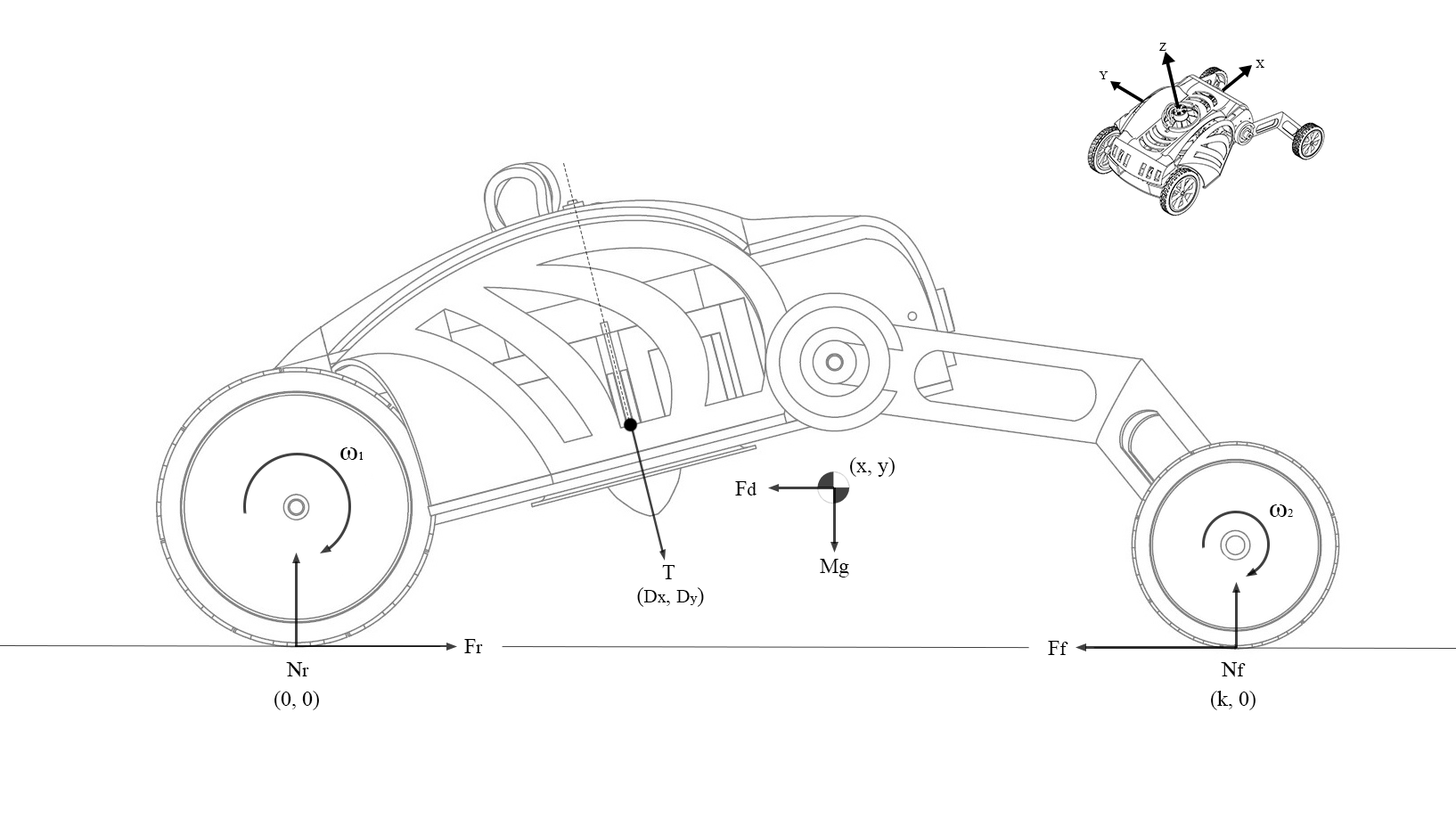
<style>
.page{position:relative;width:1456px;height:819px;background:#ffffff}
.page>*{position:absolute;margin:0}
.t1{font:11.9px "TimesNewRomanPSMT";color:#000000}
.t2{font:28.5px "TimesNewRomanPSMT";color:#000000}
.t3{font:21.4px "TimesNewRomanPSMT";color:#000000}
.t4{font:19px "TimesNewRomanPSMT";color:#000000}
.t5{font:16.6px "TimesNewRomanPSMT";color:#000000}
.t6{font:14.3px "TimesNewRomanPSMT";color:#000000}
</style>
<div class="page">
<p class="t1" style="left:1159px;top:43px;width:7px;height:8px">Z</p>
<p class="t1" style="left:1256px;top:60px;width:8px;height:8px">X</p>
<p class="t1" style="left:1099px;top:71px;width:10px;height:8px">Y</p>
<p class="t2" style="left:340px;top:447px;width:23px;height:13px">ω<span class="t1">1</span></p>
<p class="t3" style="left:850px;top:457px;width:45px;height:20px">(x, y)</p>
<p class="t3" style="left:735px;top:481px;width:22px;height:14px">F<span class="t4">d</span></p>
<p class="t2" style="left:1270px;top:504px;width:23px;height:13px">ω<span class="t1">2</span></p>
<p class="t3" style="left:662px;top:565px;width:13px;height:14px">T</p>
<p class="t3" style="left:820px;top:559px;width:29px;height:18px">Mg</p>
<p class="t3" style="left:637px;top:587px;width:67px;height:20px">(<span class="t4">D</span><span class="t5">x</span>, <span class="t4">D</span><span class="t6">y</span>)</p>
<p class="t3" style="left:464px;top:639px;width:19px;height:14px">F<span class="t4">r</span></p>
<p class="t3" style="left:1048px;top:641px;width:20px;height:14px">F<span class="t4">f</span></p>
<p class="t3" style="left:286px;top:662px;width:23px;height:15px">N<span class="t4">r</span></p>
<p class="t3" style="left:1221px;top:662px;width:25px;height:15px">N<span class="t4">f</span></p>
<p class="t3" style="left:274px;top:691px;width:45px;height:19px">(0, 0)</p>
<p class="t3" style="left:1211px;top:691px;width:45px;height:19px">(k, 0)</p>
</div>
